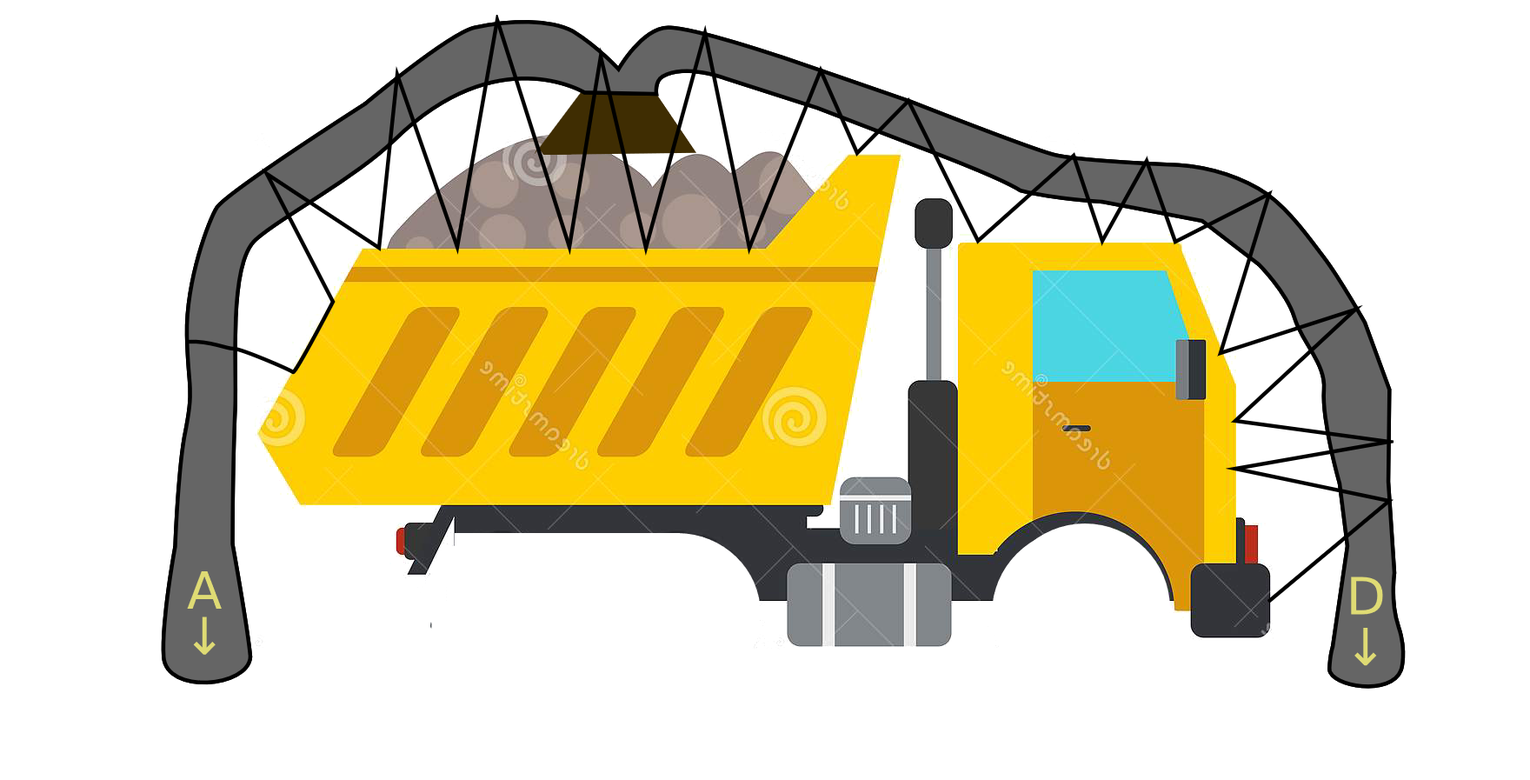
<style>
.page{position:relative;width:1530px;height:780px;background:#ffffff}
.page>*{position:absolute;margin:0}
.t1{font:51.3px "DejaVuSans";color:#dfdb74}
</style>
<div class="page">
<p class="t1" style="left:187px;top:570px;width:35px;height:38px">A</p>
<p class="t1" style="left:1351px;top:576px;width:32px;height:38px">D</p>
<p class="t1" style="left:193px;top:616px;width:23px;height:38px">↓</p>
<p class="t1" style="left:1354px;top:627px;width:23px;height:39px">↓</p>
</div>
